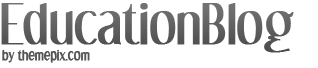
<style>
.page{position:relative;width:318px;height:68px;background:#ffffff}
.page>*{position:absolute;margin:0}
.t1{font:48px "DreamOrphans-Regular";color:#606060;font-weight:bold}
.t2{font:12px "DreamOrphans-Regular";color:#555454;font-weight:bold}
</style>
<div class="page">
<p class="t1" style="left:1px;top:3px;width:293px;height:50px">EducationBlog</p>
<p class="t2" style="left:2px;top:50px;width:88px;height:13px">by themepix.com</p>
</div>
